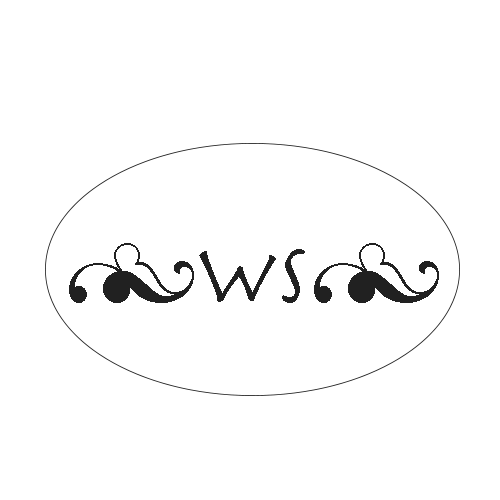
<style>
.page{position:relative;width:500px;height:500px;background:#ffffff}
.page>*{position:absolute;margin:0}
.t1{font:83.3px "Herculanum";color:#222222}
.t2{font:83.3px "HoeflerText-Ornaments";color:#222222}
</style>
<div class="page">
<p class="t1" style="left:69px;top:243px;width:370px;height:60px"><span class="t2">S</span>WS<span class="t2">S</span></p>
</div>
